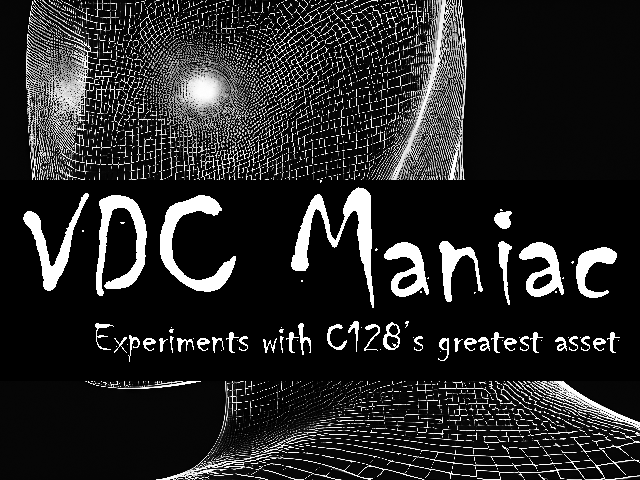
<style>
.page{position:relative;width:640px;height:480px;background:#000000}
.page>*{position:absolute;margin:0}
.t1{font:166.7px "Chiller-Regular";color:#ffffff}
.t2{font:44.4px "Chiller-Regular";color:#ffffff}
</style>
<div class="page">
<p class="t1" style="left:23px;top:180px;width:594px;height:128px">VDC Maniac</p>
<p class="t2" style="left:95px;top:321px;width:525px;height:41px">Experiments with C128’s greatest asset</p>
</div>
